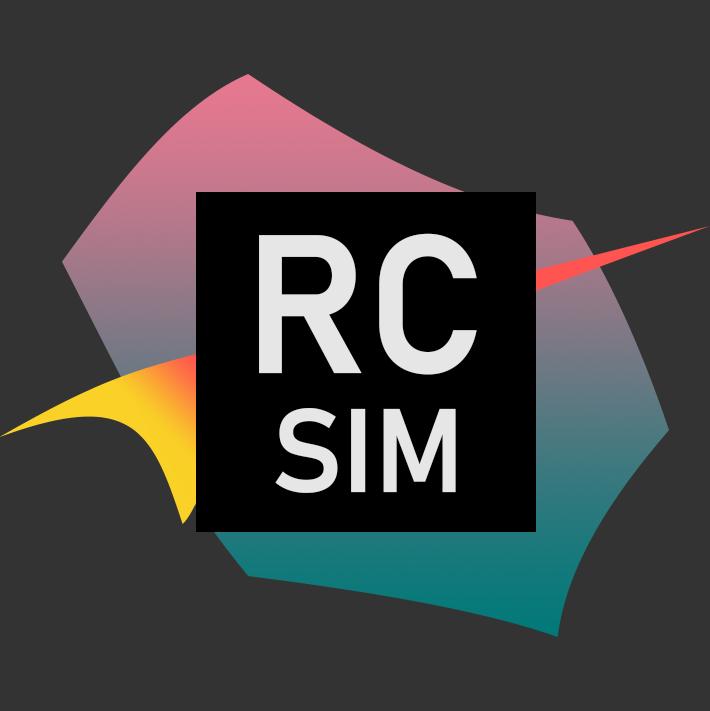
<style>
.page{position:relative;width:710px;height:711px;background:#333333}
.page>*{position:absolute;margin:0}
.t1{font:194.4px "Bahnschrift-SemiBold";color:#e6e6e6}
.t2{font:116.7px "Bahnschrift-SemiBold";color:#e6e6e6}
</style>
<div class="page">
<p class="t1" style="left:259px;top:233px;width:218px;height:142px">RC</p>
<p class="t2" style="left:275px;top:408px;width:181px;height:85px">SIM</p>
</div>
